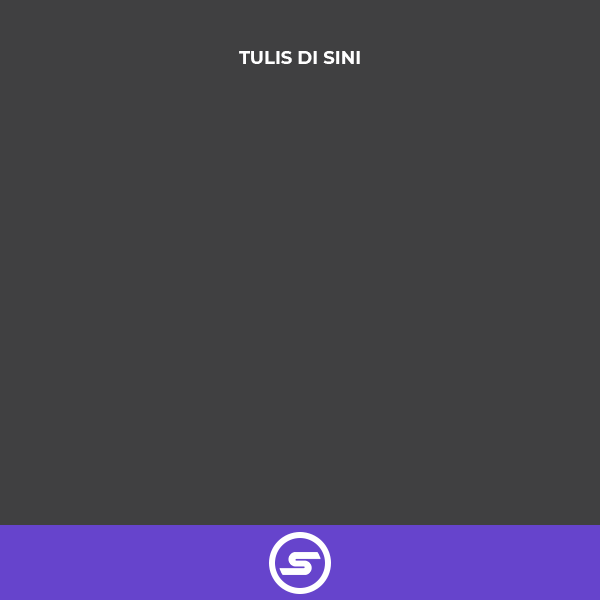
<style>
.page{position:relative;width:600px;height:600px;background:#404041}
.page>*{position:absolute;margin:0}
.t1{font:18px "Montserrat-Bold";color:#ffffff;text-transform:uppercase}
</style>
<div class="page">
<p class="t1" style="left:239px;top:51px;width:121px;height:13px">tulis di sini</p>
</div>
